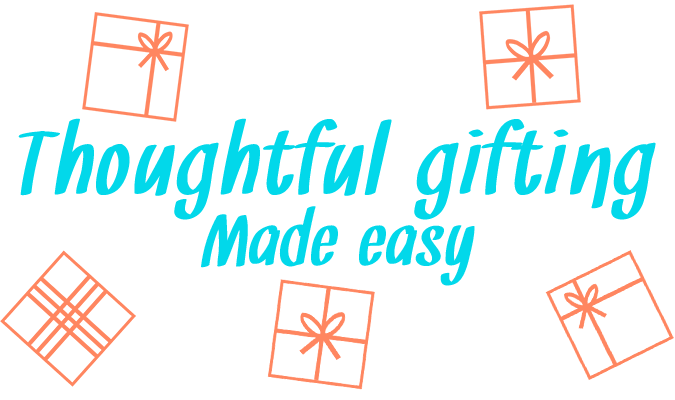
<style>
.page{position:relative;width:675px;height:400px;background:#ffffff}
.page>*{position:absolute;margin:0}
.t1{font:100px "Snickles";letter-spacing:0.055em;color:#02d8ea}
.t2{font:80px "Snickles";letter-spacing:0.035em;color:#02d8ea}
</style>
<div class="page">
<p class="t1" style="left:18px;top:118px;width:638px;height:102px">Thoughtful gifting</p>
<p class="t2" style="left:201px;top:206px;width:274px;height:80px">Made easy</p>
</div>
